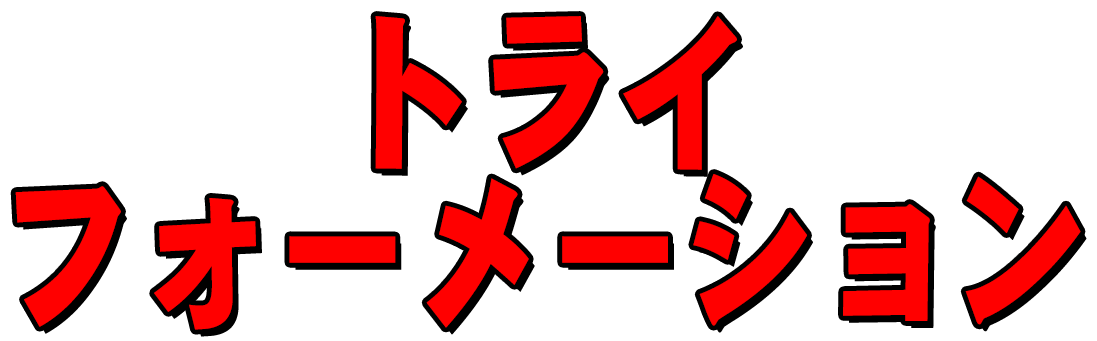
<style>
.page{position:relative;width:1097px;height:341px;background:#ffffff}
.page>*{position:absolute;margin:0}
.t1{font:167.8px/53.4px "DFGothic-EB-WIN-RKSJ-H";color:#ff0000;font-weight:bold;scale:0.79 1}
</style>
<div class="page">
<p class="t1" style="left:15px;top:16px;width:1066px;height:314px;text-align:center">トライ<br><br><br>フォーメーション</p>
</div>
